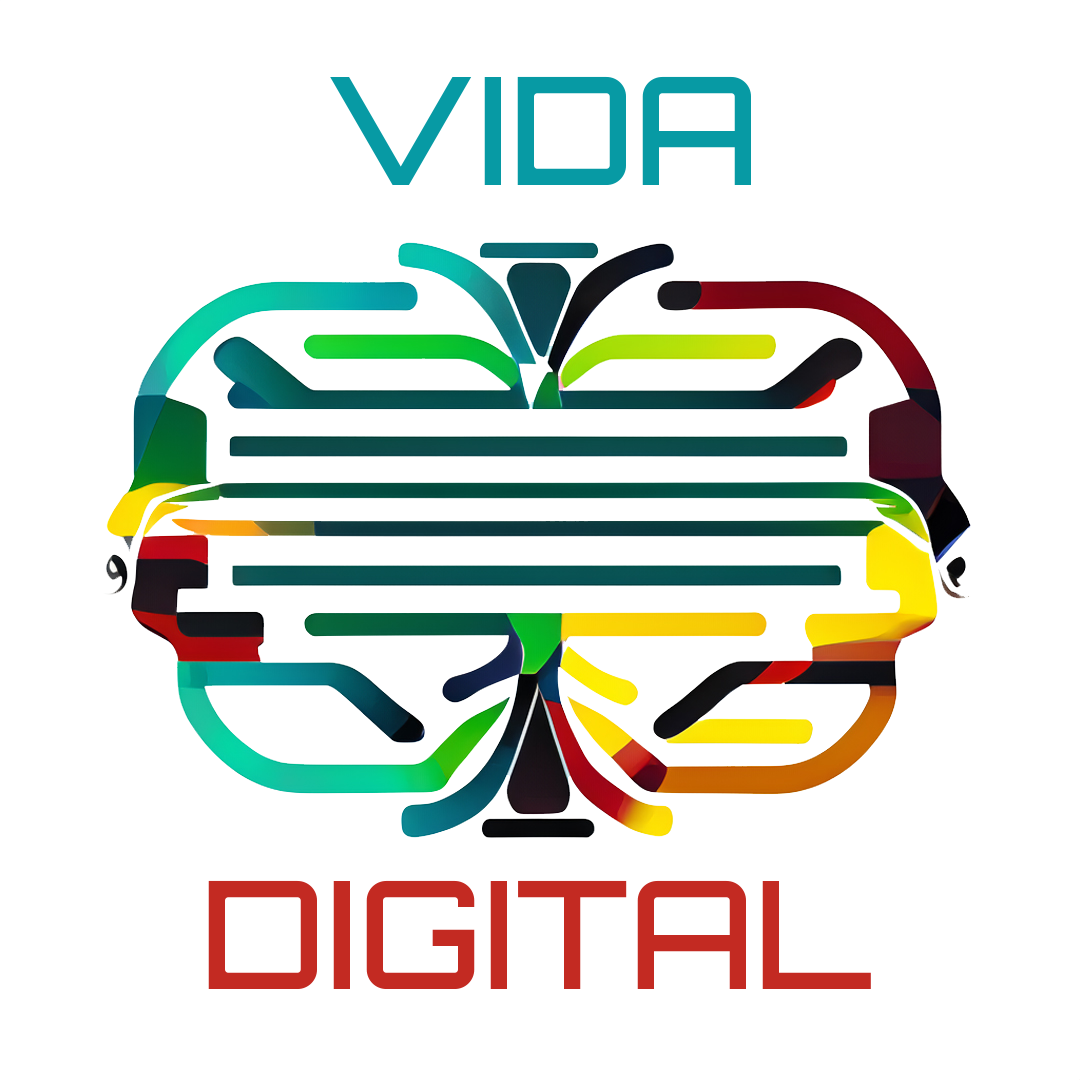
<style>
.page{position:relative;width:1080px;height:1080px;background:#ffffff}
.page>*{position:absolute;margin:0}
.t1{font:150px "Orbitron-Medium";color:#079aa4}
.t2{font:150px "Orbitron-Medium";color:#c32a22}
</style>
<div class="page">
<p class="t1" style="left:330px;top:76px;width:421px;height:109px">VIDA</p>
<p class="t2" style="left:208px;top:880px;width:663px;height:109px">DIGITAL</p>
</div>
